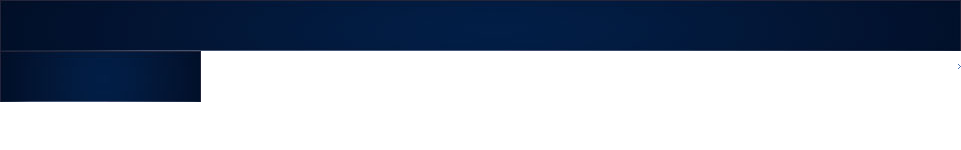
<style>
.page{position:relative;width:961px;height:150px;background:#ffffff}
.page>*{position:absolute;margin:0}
.t1{font:8px "SimSun";color:#4e76b3}
</style>
<div class="page">
<p class="t1" style="left:958px;top:64px;width:3px;height:5px">&gt;</p>
</div>
